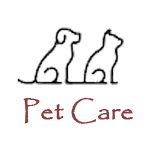
<style>
.page{position:relative;width:150px;height:150px;background:#ffffff}
.page>*{position:absolute;margin:0}
.t1{font:26px "Papyrus-Regular";color:#8d3b3b;font-weight:bold}
</style>
<div class="page">
<p class="t1" style="left:23px;top:97px;width:110px;height:27px">Pet Care</p>
</div>
